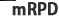
<style>
.page{position:relative;width:59px;height:16px;background:#ffffff}
.page>*{position:absolute;margin:0}
.t1{font:16px "AdobeGothicStd-Bold";color:#303030;font-weight:bold}
</style>
<div class="page">
<p class="t1" style="left:12px;top:2px;width:46px;height:14px">mRPD</p>
</div>
